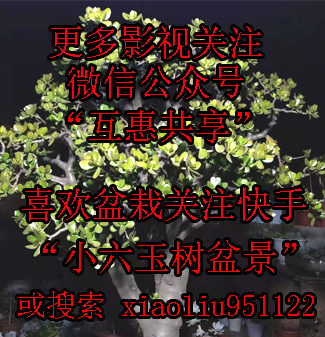
<style>
.page{position:relative;width:325px;height:337px;background:#000000}
.page>*{position:absolute;margin:0}
.t1{font:36px/40px "SimSun";color:#ff0012}
.t2{font:36px "SimSun";color:#ff0000}
.t3{font:36px "SimSun";color:#ff0012}
.t4{font:30px "SimSun";color:#ff0000}
</style>
<div class="page">
<p class="t1" style="left:50px;top:26px;width:212px;height:73px">更多影视关注<br> 微信公众号</p>
<p class="t2" style="left:68px;top:109px;width:182px;height:34px">“互惠共享”</p>
<p class="t3" style="left:22px;top:187px;width:284px;height:34px">喜欢盆栽关注快手</p>
<p class="t2" style="left:43px;top:240px;width:254px;height:34px">“小六玉树盆景”</p>
<p class="t4" style="left:18px;top:291px;width:296px;height:28px">或搜索 xiaoliu951122</p>
</div>
